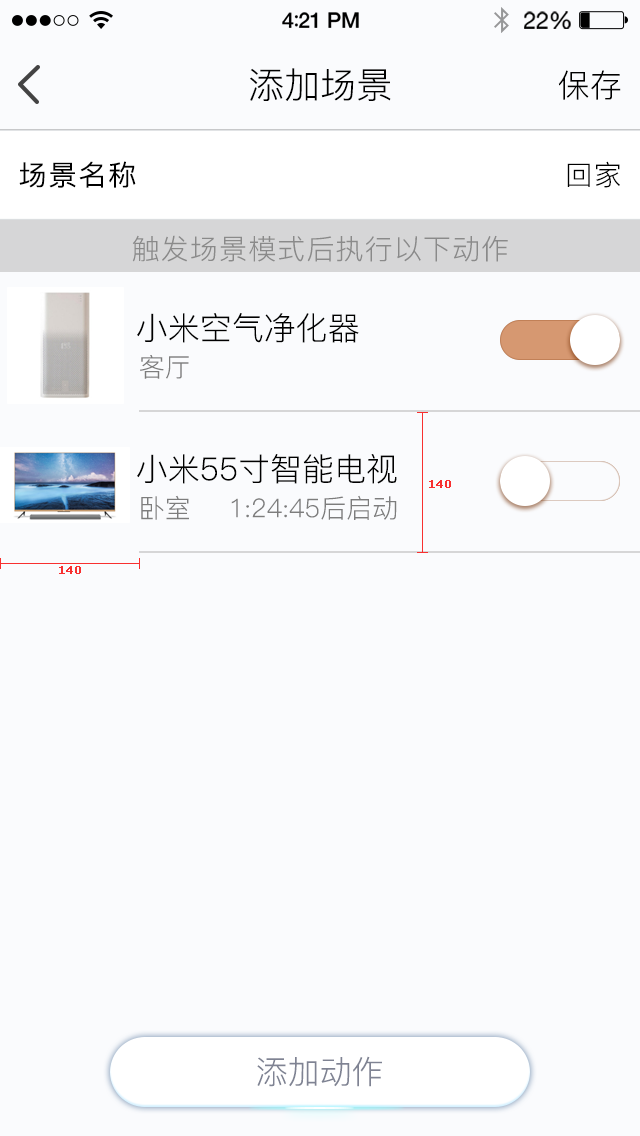
<style>
.page{position:relative;width:640px;height:1136px;background:#fafbfd}
.page>*{position:absolute;margin:0}
.t1{font:36px "PingFang-SC-Regular";color:#000000}
.t2{font:32px "PingFang-SC-Regular";color:#000000}
.t3{font:28px "PingFang-SC-Regular";letter-spacing:0.04em;color:#000000;font-weight:bold}
.t4{font:28px "PingFang-SC-Regular";letter-spacing:0.04em;color:#000000}
.t5{font:28px "PingFang-SC-Regular";letter-spacing:0.04em;color:#8a8a8a}
.t6{font:26px "PingFang-SC-Regular";color:#7d7d7d}
.t7{font:11px "Verdana";color:#f83030;font-weight:bold}
.t8{font:32px "PingFang-SC-Regular";color:#7f8393}
</style>
<div class="page">
<p class="t1" style="left:250px;top:68px;width:141px;height:33px">添加场景</p>
<p class="t2" style="left:558px;top:70px;width:63px;height:30px">保存</p>
<p class="t3" style="left:19px;top:161px;width:117px;height:27px">场景名称</p>
<p class="t4" style="left:567px;top:161px;width:53px;height:27px">回家</p>
<p class="t5" style="left:132px;top:235px;width:376px;height:27px">触发场景模式后执行以下动作</p>
<p class="t2" style="left:137px;top:313px;width:222px;height:30px">小米空气净化器</p>
<p class="t6" style="left:140px;top:355px;width:49px;height:24px">客厅</p>
<p class="t2" style="left:137px;top:454px;width:260px;height:30px">小米55寸智能电视</p>
<p class="t7" style="left:429px;top:480px;width:22px;height:8px">140</p>
<p class="t6" style="left:141px;top:495px;width:48px;height:25px">卧室</p>
<p class="t6" style="left:231px;top:495px;width:166px;height:25px">1:24:45后启动</p>
<p class="t7" style="left:59px;top:566px;width:22px;height:8px">140</p>
<p class="t8" style="left:257px;top:1056px;width:125px;height:31px">添加动作</p>
</div>
